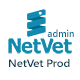
<style>
.page{position:relative;width:80px;height:80px;background:#ffffff}
.page>*{position:absolute;margin:0}
.t1{font:10px "SegoeUI-Semibold";color:#006d91;scale:0.95 1}
.t2{font:10.4px "SegoeUI-Semibold";letter-spacing:-0.01em;color:#0d3d52;scale:1.1 1}
</style>
<div class="page">
<p class="t1" style="left:47px;top:29px;width:27px;height:8px">admin</p>
<p class="t2" style="left:9px;top:59px;width:61px;height:8px">NetVet Prod</p>
</div>
